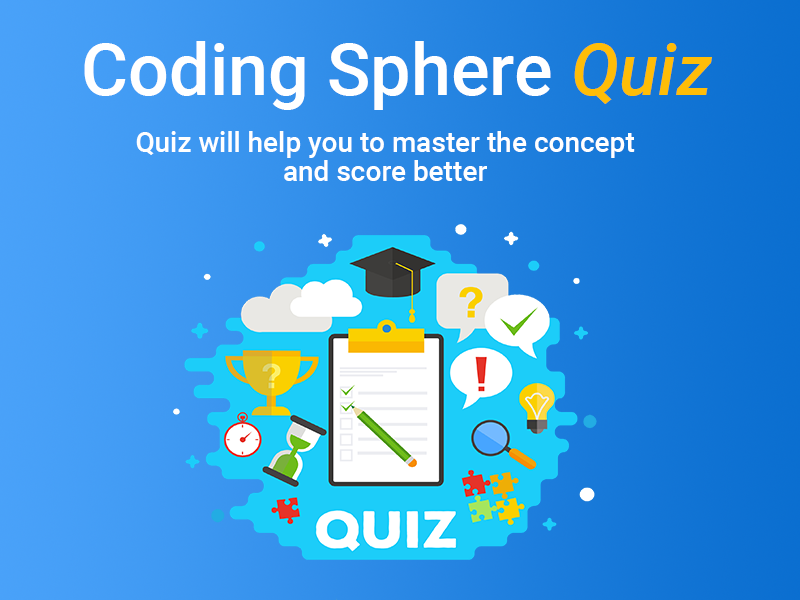
<style>
.page{position:relative;width:800px;height:600px}
.page>*{position:absolute;margin:0}
.t1{font:72px "Roboto-Medium";color:#ffffff}
.t2{font:72px "Roboto-MediumItalic";color:#ffbd07}
.t3{font:28px/5.8px "Roboto-Medium";color:#ffffff}
</style>
<div class="page">
<p class="t1" style="left:84px;top:41px;width:628px;height:69px">Coding Sphere <span class="t2">Quiz</span></p>
<p class="t3" style="left:136px;top:131px;width:499px;height:50px;text-align:center">Quiz will help you to master the concept <br><br><br><br><br>and score better</p>
</div>
